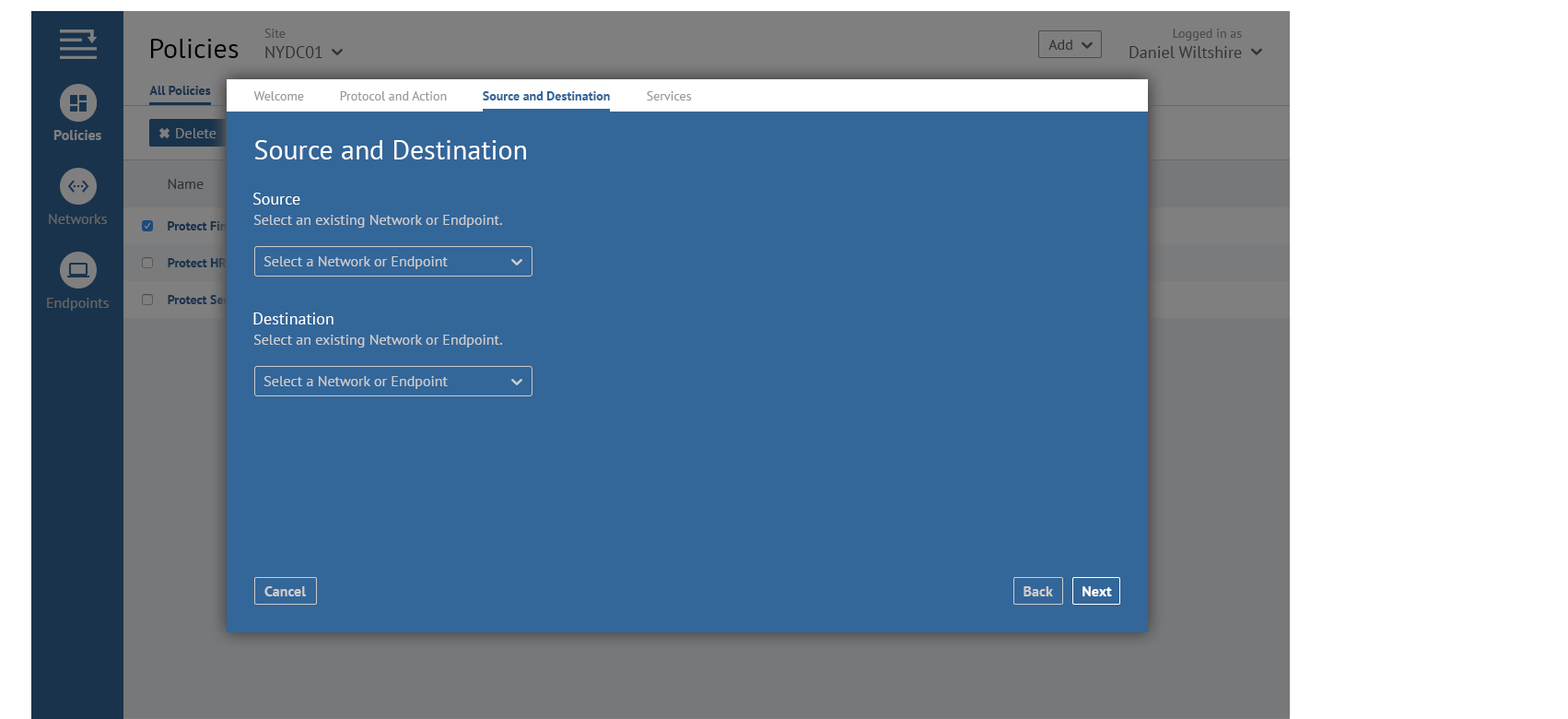
<style>
.page{position:relative;width:1568px;height:719px;background:#336699}
.page>*{position:absolute;margin:0}
.t1{font:16.6px "PTSans-Regular"}
.t2{font:12.9px "PTSans-Regular"}
.t3{font:16.8px "PTSans-Regular"}
.t4{font:13.1px "PTSans-Regular"}
.t5{font:27.6px "PTSans-Regular";color:#000000}
.t6{font:14.7px "PTSans-Regular";color:#333333}
.t7{font:12.8px "PTSans-Bold";color:#19334c}
.t8{font:12.8px "PTSans-Regular";color:#999999}
.t9{font:12.8px "PTSans-Bold";color:#336699}
.t10{font:14.7px "PTSans-Bold";color:#7f7f7f}
.t11{font:14.7px "PTSans-Regular";color:#7f7f7f}
.t12{font:27.6px "PTSans-Regular";color:#ffffff}
.t13{font:16.6px "PTSans-Regular";color:#ffffff}
.t14{font:14.7px "PTSans-Regular";color:#666666}
.t15{font:12.9px "PTSans-Bold"}
.t16{font:14.7px "PTSans-Regular";color:#cccccc}
.t17{font:12.9px "PTSans-Bold";color:#19334c}
.t18{font:14.7px "PTSans-Bold";color:#cccccc}
.t19{font:14.7px "PTSans-Bold";color:#ffffff}
</style>
<div class="page">
<p class="t1" style="left:264px;top:29px;width:58px;height:29px"><span class="t2">Site<br></span>NYDC01</p>
<p class="t3" style="left:1129px;top:29px;width:113px;height:29px;text-align:right"><span class="t4">Logged in as<br></span>Daniel Wiltshire</p>
<p class="t5" style="left:151px;top:39px;width:88px;height:19px">Policies</p>
<p class="t6" style="left:1048px;top:40px;width:24px;height:10px">Add</p>
<p class="t7" style="left:149px;top:86px;width:62px;height:9px">All Policies</p>
<p class="t8" style="left:253px;top:91px;width:51px;height:9px">Welcome</p>
<p class="t8" style="left:340px;top:91px;width:107px;height:9px">Protocol and Action</p>
<p class="t9" style="left:483px;top:91px;width:127px;height:9px">Source and Destination</p>
<p class="t8" style="left:647px;top:91px;width:45px;height:9px">Services</p>
<p class="t10" style="left:53px;top:130px;width:48px;height:10px">Policies</p>
<p class="t11" style="left:176px;top:128px;width:40px;height:10px">Delete</p>
<p class="t12" style="left:254px;top:140px;width:272px;height:19px">Source and Destination</p>
<p class="t6" style="left:168px;top:179px;width:36px;height:10px">Name</p>
<p class="t13" style="left:253px;top:193px;width:47px;height:12px">Source</p>
<p class="t14" style="left:49px;top:214px;width:58px;height:10px">Networks</p>
<p class="t15" style="left:168px;top:221px;width:84px;height:9px">Protect Finance</p>
<p class="t16" style="left:253px;top:215px;width:249px;height:13px">Select an existing Network or Endpoint.</p>
<p class="t17" style="left:168px;top:258px;width:59px;height:9px">Protect HR</p>
<p class="t16" style="left:263px;top:256px;width:185px;height:13px">Select a Network or Endpoint</p>
<p class="t14" style="left:47px;top:298px;width:62px;height:12px">Endpoints</p>
<p class="t15" style="left:168px;top:295px;width:83px;height:9px">Protect Servers</p>
<p class="t13" style="left:253px;top:312px;width:80px;height:12px">Destination</p>
<p class="t16" style="left:253px;top:334px;width:249px;height:13px">Select an existing Network or Endpoint.</p>
<p class="t16" style="left:263px;top:376px;width:185px;height:13px">Select a Network or Endpoint</p>
<p class="t18" style="left:264px;top:586px;width:42px;height:10px">Cancel</p>
<p class="t18" style="left:1024px;top:586px;width:29px;height:10px">Back</p>
<p class="t19" style="left:1082px;top:586px;width:30px;height:10px">Next</p>
</div>
